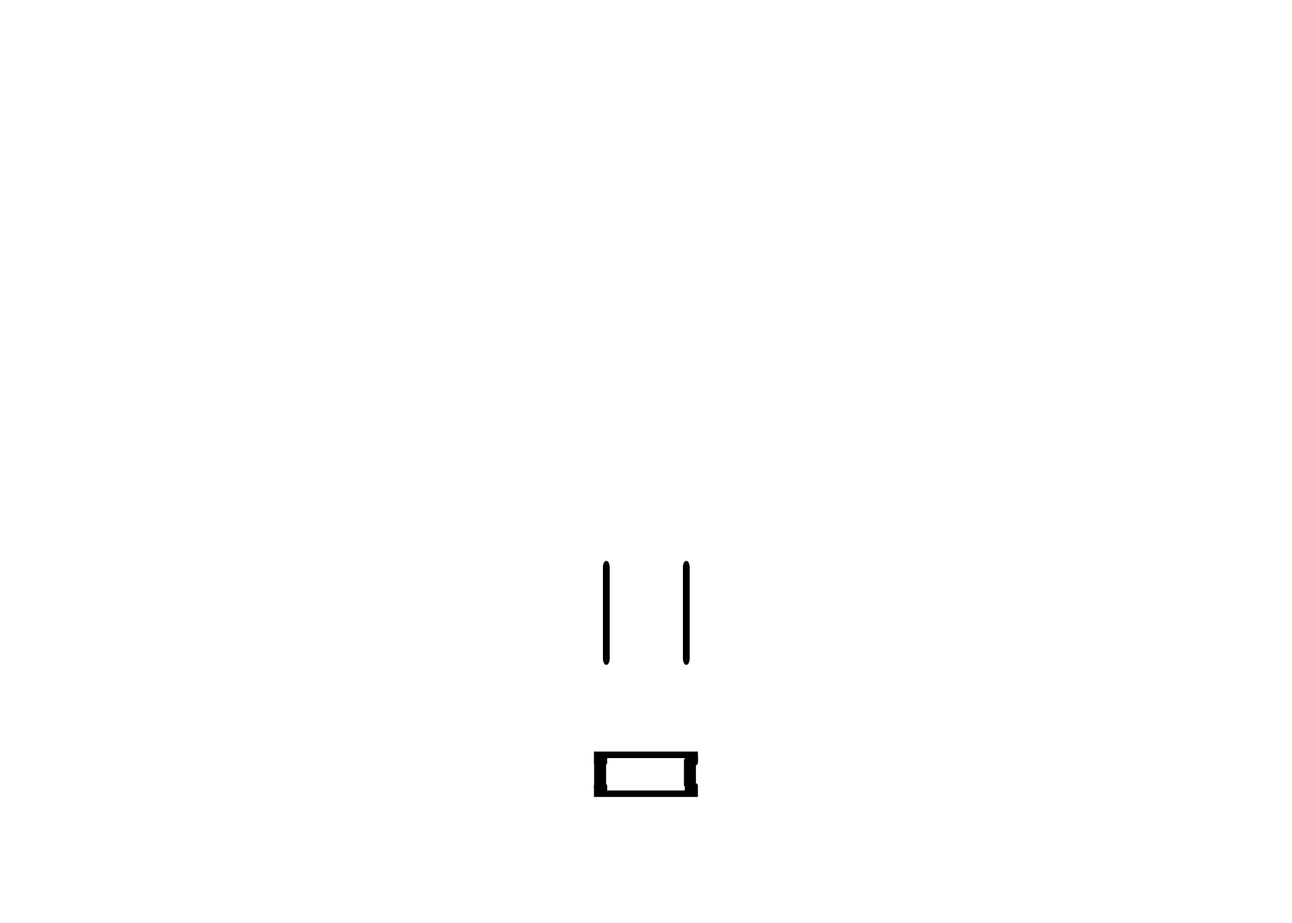
<style>
.page{position:relative;width:1292px;height:923px;background:#ffffff}
.page>*{position:absolute;margin:0}
.t1{font:132px "CourierNewPS-BoldMT";color:#000000;scale:0.5 1}
.t2{font:132px "CourierNewPS-BoldMT";color:#000000;scale:0.49 1}
</style>
<div class="page">
<p class="t1" style="left:603px;top:561px;width:87px;height:104px">| |</p>
<p class="t2" style="left:594px;top:751px;width:104px;height:46px;rotate:-90deg">[]</p>
<p class="t2" style="left:594px;top:760px;width:13px;height:28px;rotate:-90deg">-</p>
<p class="t2" style="left:684px;top:759px;width:12px;height:27px;rotate:-90deg">-</p>
</div>
